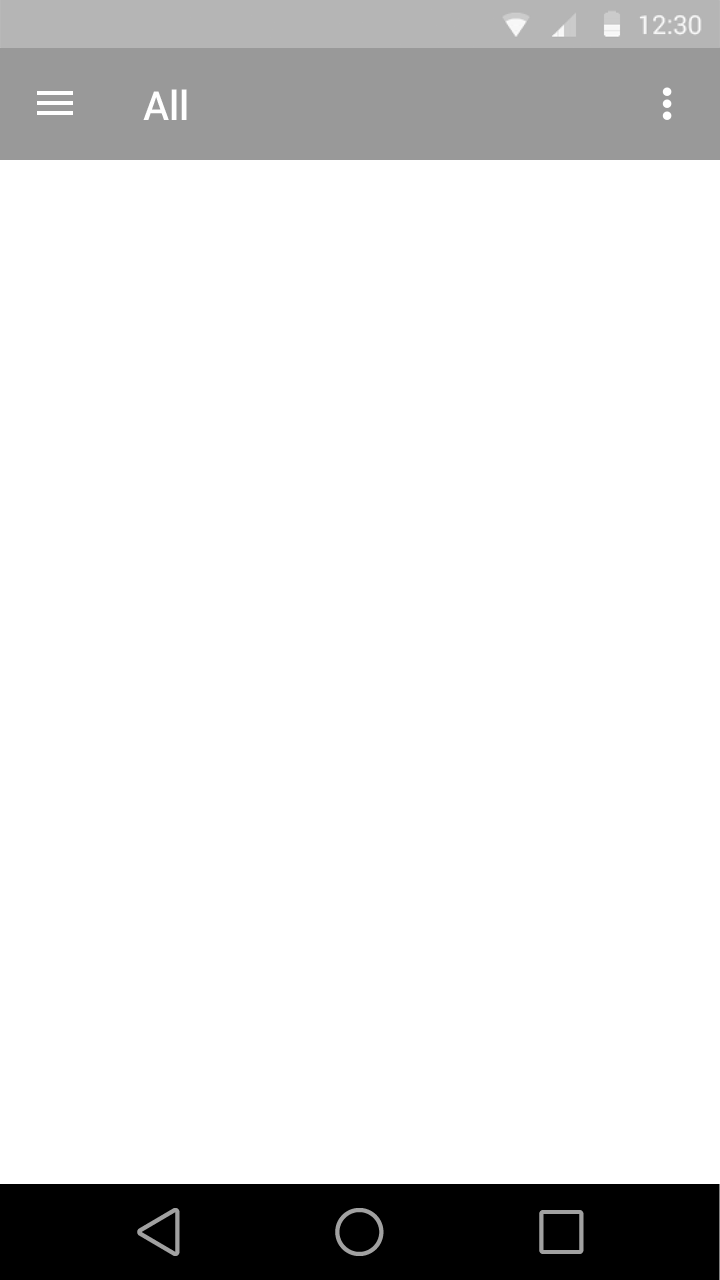
<style>
.page{position:relative;width:720px;height:1280px;background:#ffffff}
.page>*{position:absolute;margin:0}
.t1{font:40px "Roboto-Medium";color:#ffffff}
</style>
<div class="page">
<p class="t1" style="left:143px;top:89px;width:44px;height:31px">All</p>
</div>
